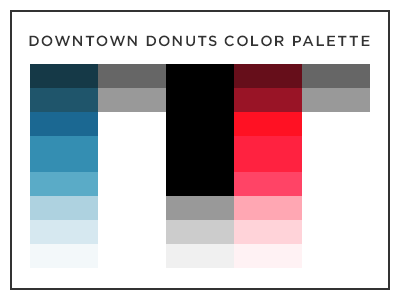
<style>
.page{position:relative;width:400px;height:300px;background:#ffffff}
.page>*{position:absolute;margin:0}
.t1{font:14.7px "Gotham-Medium";letter-spacing:0.1em;color:#333333;text-transform:uppercase}
</style>
<div class="page">
<p class="t1" style="left:29px;top:35px;width:341px;height:12px">Downtown Donuts COLOR Palette</p>
</div>
